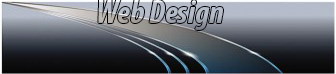
<style>
.page{position:relative;width:336px;height:74px}
.page>*{position:absolute;margin:0}
.t1{font:33px "MyriadPro-BoldCondIt"}
</style>
<div class="page">
<p class="t1" style="left:98px;top:0px;width:125px;height:30px">Web Design</p>
</div>
